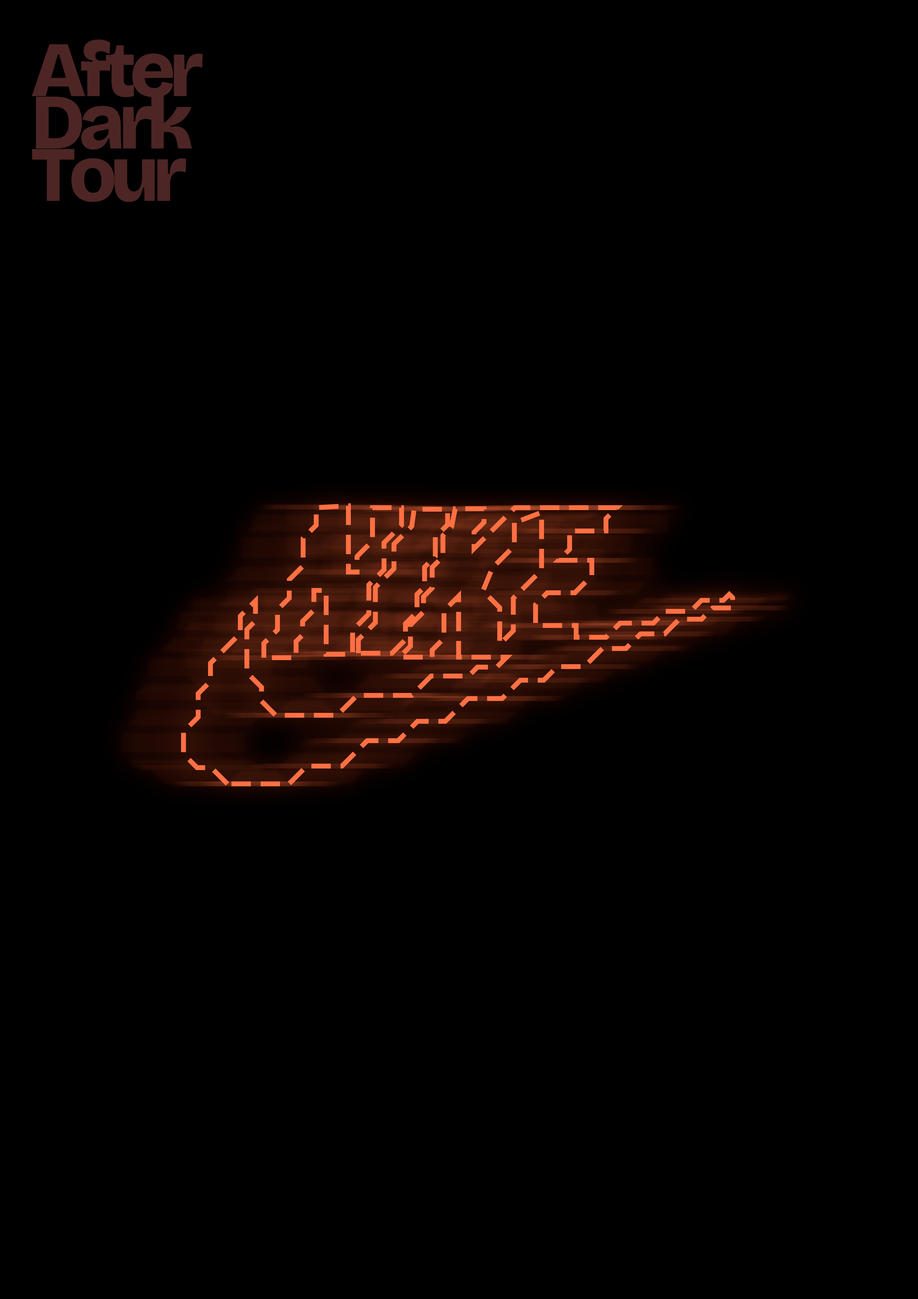
<style>
.page{position:relative;width:918px;height:1299px;background:#000000}
.page>*{position:absolute;margin:0}
.t1{font:78.5px/52.4px "BricolageGrotesque_27.000opsz";letter-spacing:-0.08em;color:#4d2525}
</style>
<div class="page">
<p class="t1" style="left:32px;top:40px;width:171px;height:162px">After<br>Dark<br>Tour</p>
</div>
